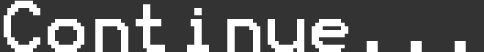
<style>
.page{position:relative;width:484px;height:52px;background:#333333}
.page>*{position:absolute;margin:0}
.t1{font:58.7px "Terminal";color:#ffffff}
</style>
<div class="page">
<p class="t1" style="left:3px;top:0px;width:463px;height:52px">Continue...</p>
</div>
